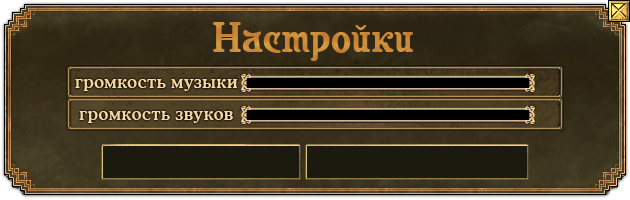
<style>
.page{position:relative;width:630px;height:200px}
.page>*{position:absolute;margin:0}
.t1{font:42px "Casanova";letter-spacing:0.01em;color:#c78335}
.t2{font:16.7px "CooperMediumCBT";letter-spacing:0.04em;color:#f8d99c}
</style>
<div class="page">
<p class="t1" style="left:213px;top:22px;width:200px;height:39px">Настройки</p>
<p class="t2" style="left:75px;top:79px;width:163px;height:12px">громкость музыки</p>
<p class="t2" style="left:79px;top:111px;width:154px;height:12px">громкость звуков</p>
</div>
